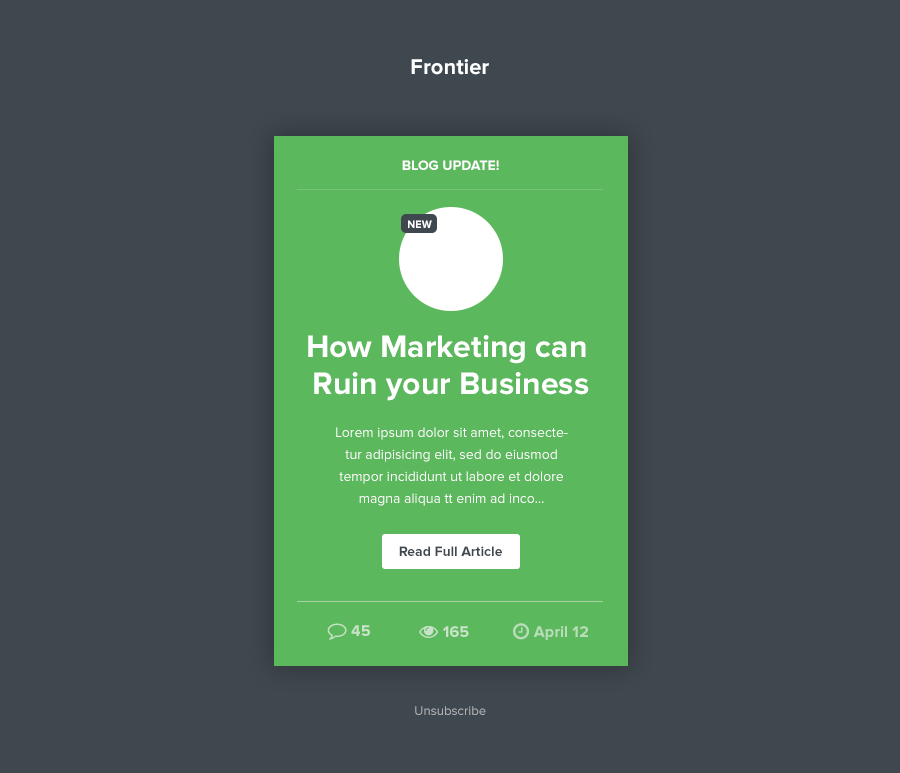
<style>
.page{position:relative;width:900px;height:773px;background:#40484f}
.page>*{position:absolute;margin:0}
.t1{font:22px "ProximaNova-Bold";color:#ffffff}
.t2{font:14px "ProximaNova-Bold";color:#ffffff;text-transform:uppercase}
.t3{font:11px "ProximaNova-Bold";color:#ffffff;text-transform:uppercase}
.t4{font:32.1px/32.1px "ProximaNova-Bold";color:#fffefe}
.t5{font:14px/22px "ProximaNova-Regular";color:#ffffff}
.t6{font:14px "ProximaNova-Bold";color:#40484f}
.t7{font:13.1px "ProximaNova-Regular";color:#b1b3b5}
</style>
<div class="page">
<p class="t1" style="left:411px;top:59px;width:78px;height:16px">Frontier</p>
<p class="t2" style="left:402px;top:160px;width:97px;height:10px">blog update!</p>
<p class="t3" style="left:408px;top:220px;width:24px;height:8px">NEW</p>
<p class="t4" style="left:308px;top:335px;width:281px;height:66px;text-align:center">How Marketing can <br>Ruin your Business</p>
<p class="t5" style="left:336px;top:427px;width:232px;height:79px;text-align:center">Lorem ipsum dolor sit amet, consectetur adipisicing elit, sed do eiusmod tempor incididunt ut labore et dolore magna aliqua tt enim ad inco...</p>
<p class="t6" style="left:399px;top:546px;width:103px;height:10px">Read Full Article</p>
<p class="t7" style="left:415px;top:706px;width:71px;height:9px">Unsubscribe</p>
</div>
